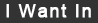
<style>
.page{position:relative;width:98px;height:23px;background:#333333}
.page>*{position:absolute;margin:0}
.t1{font:18px "ArialMT";letter-spacing:0.1em;color:#ffffff;font-weight:bold}
</style>
<div class="page">
<p class="t1" style="left:6px;top:4px;width:85px;height:14px">I Want In</p>
</div>
